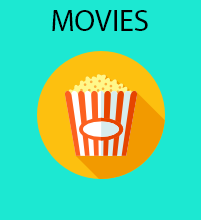
<style>
.page{position:relative;width:201px;height:220px;background:#1ce8d2}
.page>*{position:absolute;margin:0}
.t1{font:30px "MyriadPro-Regular";color:#000000}
</style>
<div class="page">
<p class="t1" style="left:52px;top:10px;width:96px;height:21px">MOVIES</p>
</div>
